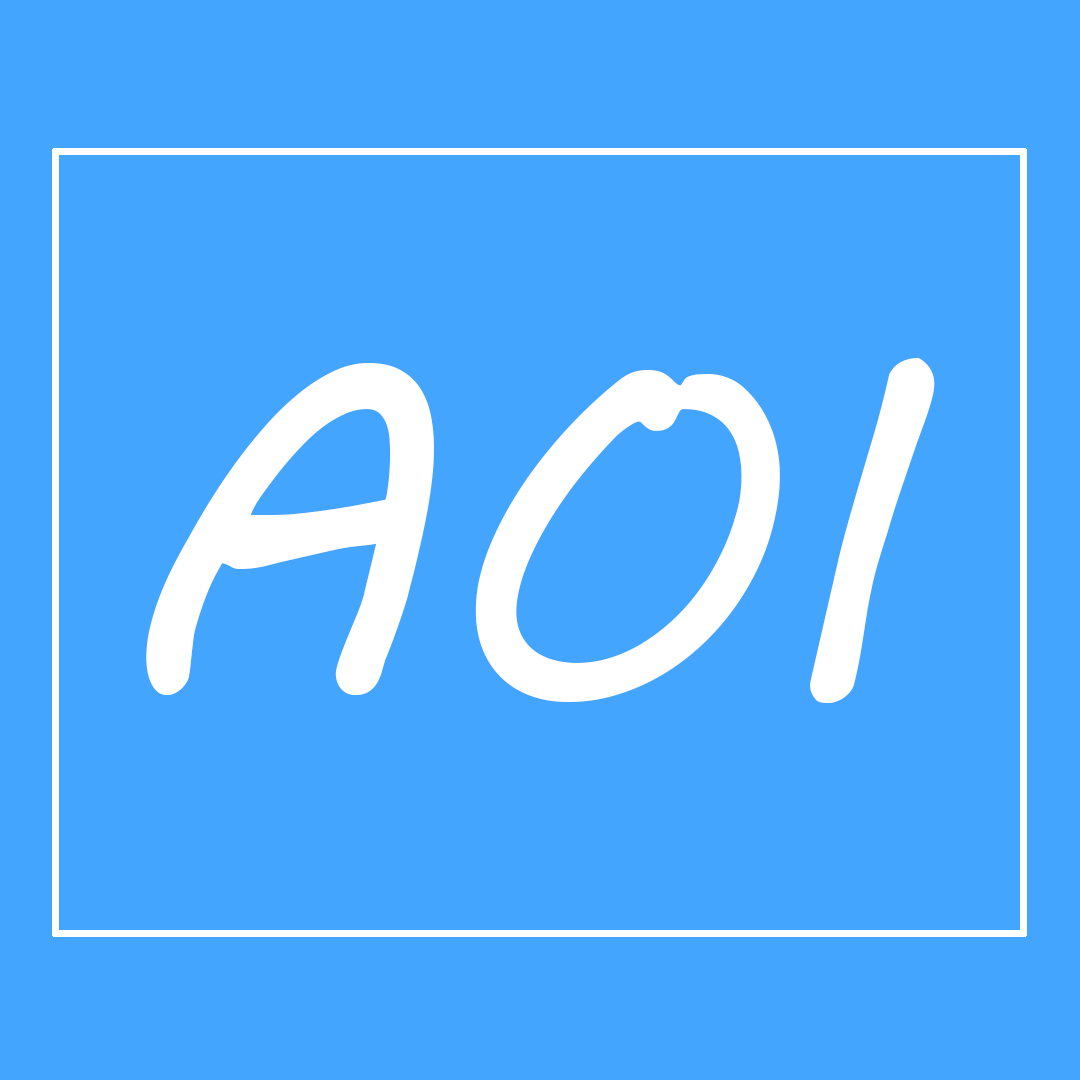
<style>
.page{position:relative;width:1080px;height:1080px;background:#44a5ff}
.page>*{position:absolute;margin:0}
.t1{font:466.7px "MVBoli";color:#ffffff}
</style>
<div class="page">
<p class="t1" style="left:146px;top:358px;width:789px;height:345px">AOI</p>
</div>
